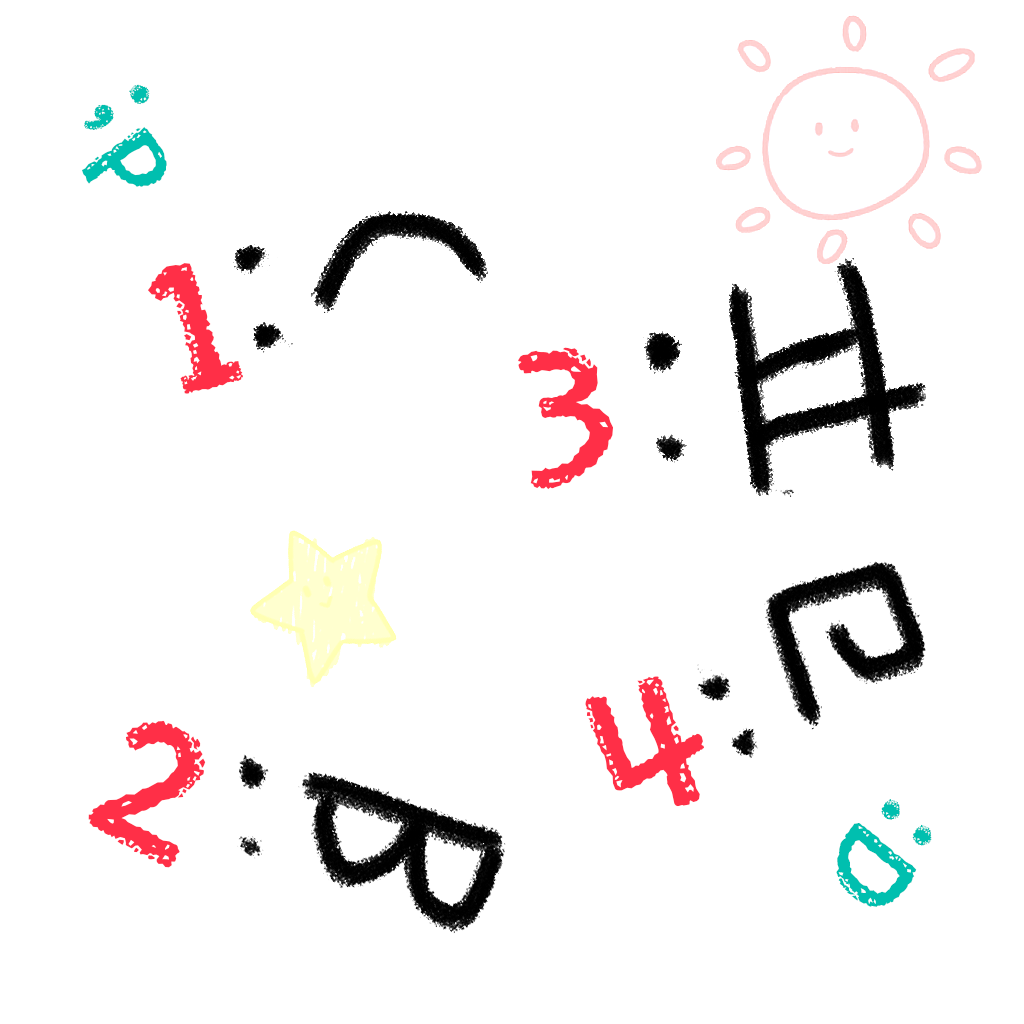
<style>
.page{position:relative;width:1024px;height:1024px;background:#ffffff}
.page>*{position:absolute;margin:0}
.t1{font:128.5px "TypoCrayonM";color:#00bfaf}
.t2{font:209.8px "TypoCrayonM";color:#ff2f47}
</style>
<div class="page">
<p class="t1" style="left:81px;top:84px;width:86px;height:103px;rotate:61deg">;p</p>
<p class="t2" style="left:147px;top:263px;width:96px;height:131px;rotate:-11deg">1</p>
<p class="t2" style="left:518px;top:347px;width:95px;height:143px">3</p>
<p class="t2" style="left:585px;top:676px;width:119px;height:131px;rotate:-17deg">4</p>
<p class="t2" style="left:88px;top:720px;width:118px;height:148px;rotate:33deg">2</p>
<p class="t1" style="left:836px;top:799px;width:96px;height:108px;rotate:129deg">:D</p>
</div>
